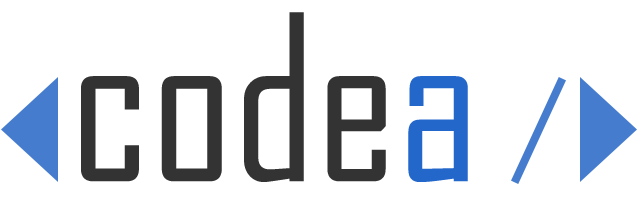
<style>
.page{position:relative;width:640px;height:200px;background:#ffffff}
.page>*{position:absolute;margin:0}
.t1{font:220.8px "AgencyFB-Reg";color:#333333}
.t2{font:220.8px "AgencyFB-Reg";color:#2467cb}
</style>
<div class="page">
<p class="t1" style="left:81px;top:12px;width:387px;height:170px">code<span class="t2">a</span></p>
</div>
